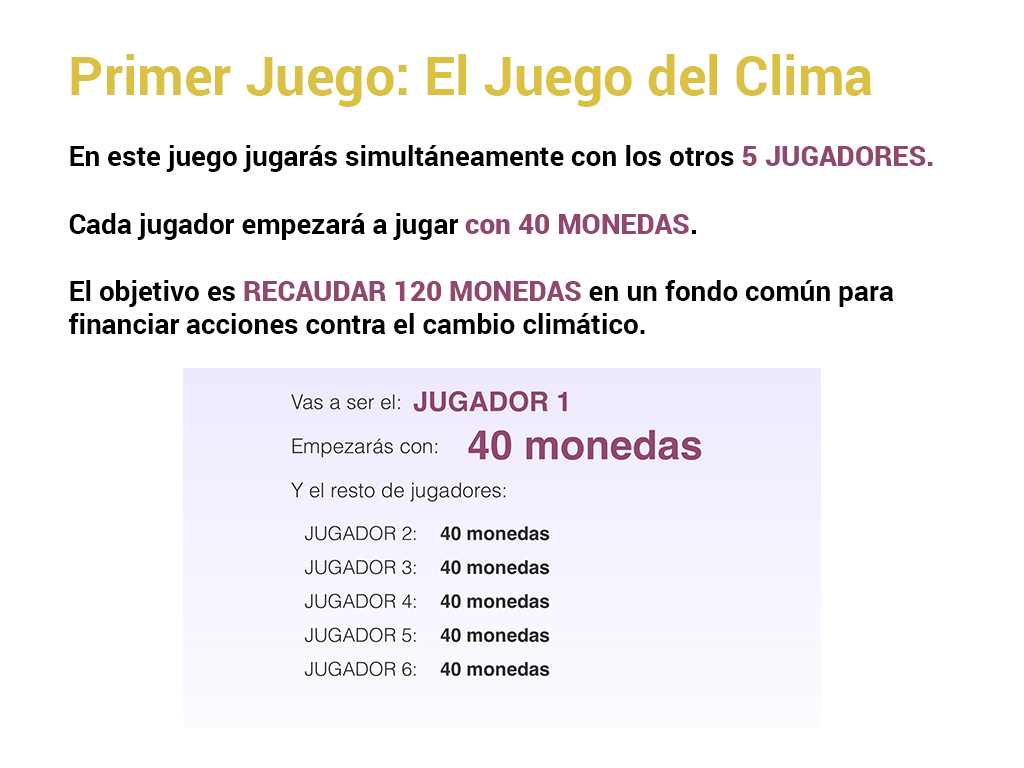
<style>
.page{position:relative;width:1024px;height:768px;background:#ffffff}
.page>*{position:absolute;margin:0}
.t1{font:54px "Roboto-Bold";color:#dac043}
.t2{font:28px "Roboto-Bold";color:#000000}
.t3{font:28px "Roboto-Black";color:#92476e}
</style>
<div class="page">
<p class="t1" style="left:71px;top:54px;width:801px;height:53px">Primer Juego: El Juego del Clima</p>
<p class="t2" style="left:68px;top:145px;width:865px;height:189px">En este juego jugarás simultáneamente con los otros <span class="t3">5 JUGADORES.<br></span><br>Cada jugador empezará a jugar <span class="t3">con 40 MONEDAS</span>.<br><br>El objetivo es <span class="t3">RECAUDAR 120 MONEDAS </span>en un fondo común para <br>financiar acciones contra el cambio climático.</p>
</div>
